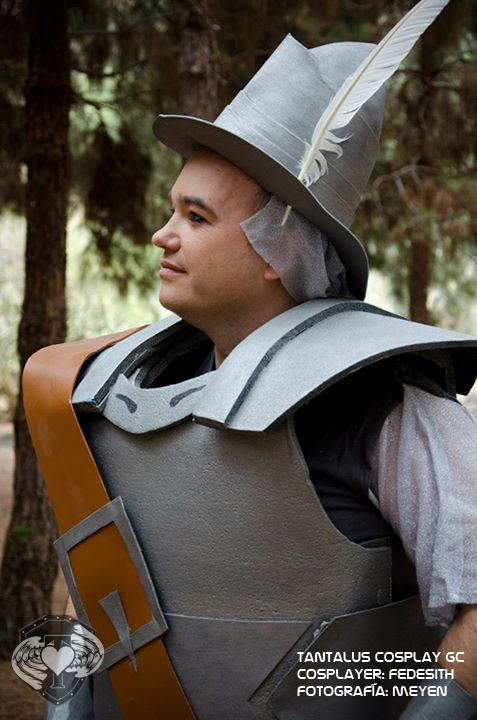
<style>
.page{position:relative;width:477px;height:720px}
.page>*{position:absolute;margin:0}
.t1{font:14px "NasalizationRg-Regular";color:#ffffff}
</style>
<div class="page">
<p class="t1" style="left:297px;top:652px;width:167px;height:44px">tantalus cosplay gc<br>cosplayer: fedesith<br>fotografía: meyen</p>
</div>
